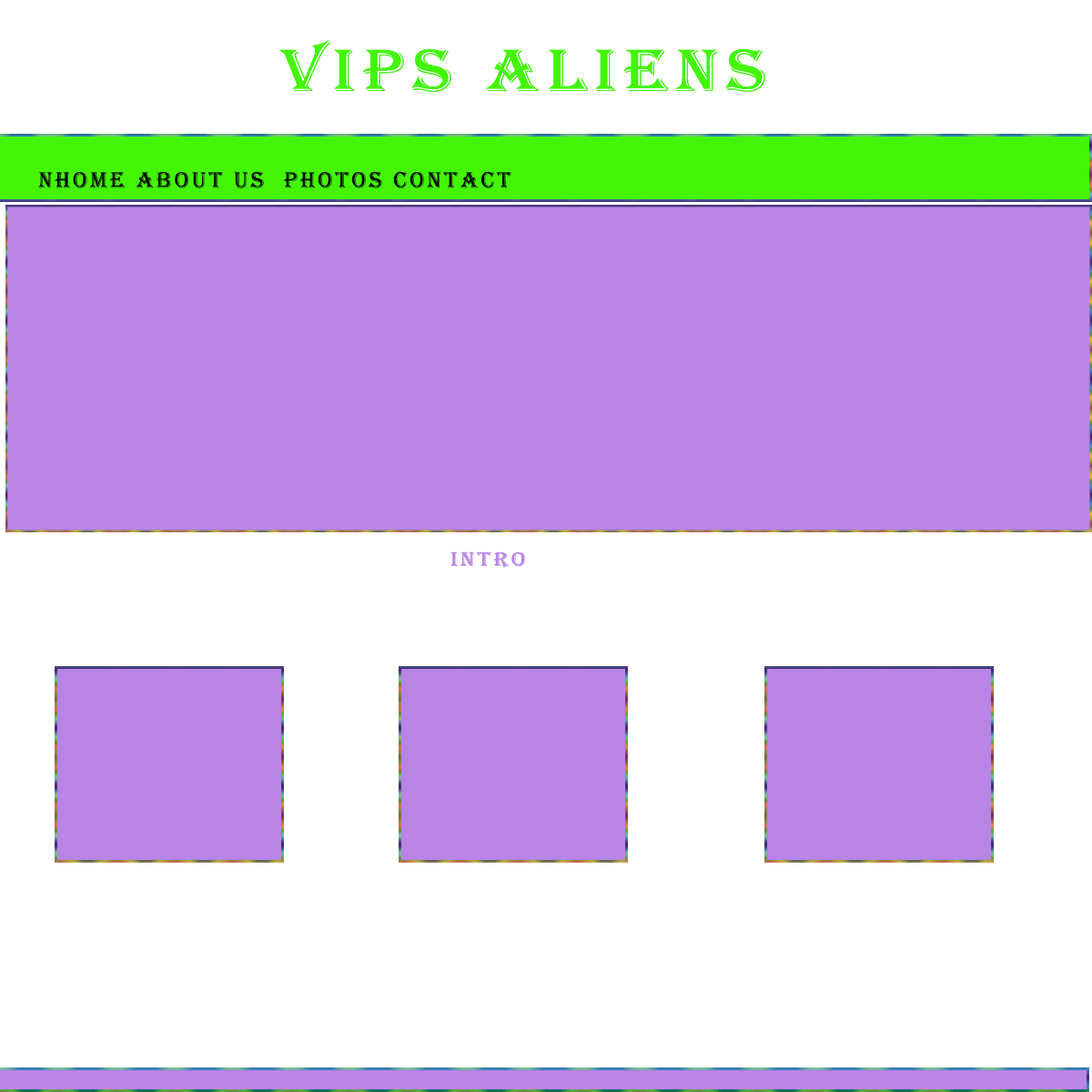
<style>
.page{position:relative;width:1092px;height:1092px;background:#ffffff}
.page>*{position:absolute;margin:0}
.t1{font:61.6px "Algerian";letter-spacing:0.12em;color:#43f505;scale:1.14 1}
.t2{font:23.2px "Algerian";letter-spacing:0.12em;color:#070707}
.t3{font:20.5px "Algerian";letter-spacing:0.12em;color:#b884e5;scale:1.14 1}
</style>
<div class="page">
<p class="t1" style="left:279px;top:40px;width:486px;height:52px">vips Aliens</p>
<p class="t1" style="left:279px;top:40px;width:486px;height:52px">vips Aliens</p>
<p class="t2" style="left:37px;top:171px;width:474px;height:17px">nhome about us  photos contact</p>
<p class="t3" style="left:450px;top:551px;width:76px;height:17px">intro</p>
</div>
